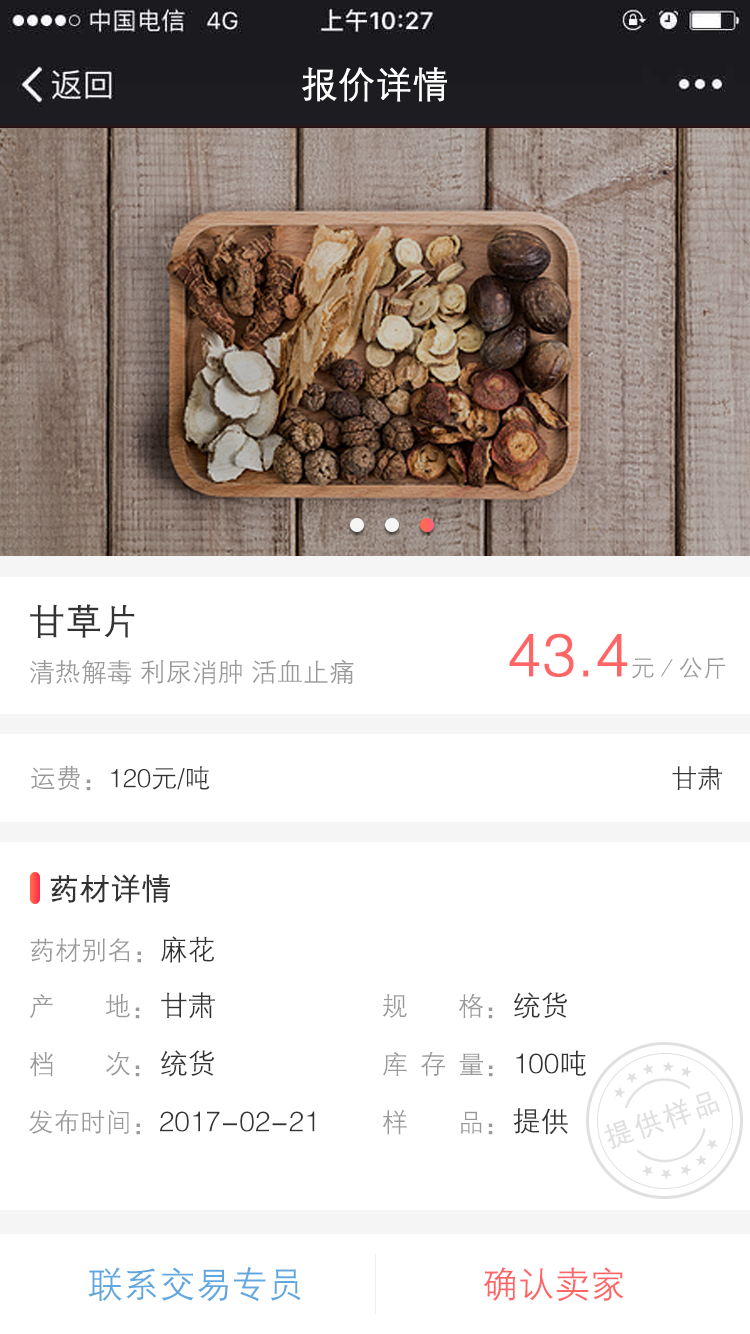
<style>
.page{position:relative;width:750px;height:1334px;background:#ffffff}
.page>*{position:absolute;margin:0}
.t1{font:36px "FZZDXJW--GB1-0";color:#ffffff;font-weight:bold}
.t2{font:36px "FZZDXJW--GB1-0";color:#333333;font-weight:bold}
.t3{font:60px "FZZDXJW--GB1-0";color:#ff6565;font-weight:bold}
.t4{font:24px "FZZDXJW--GB1-0";color:#999999}
.t5{font:26px "FZZDXJW--GB1-0";color:#999999}
.t6{font:26px "FZZDXJW--GB1-0";color:#333333}
.t7{font:30px "FZZDXJW--GB1-0";color:#333333;font-weight:bold}
.t8{font:28px "FZZDXJW--GB1-0";color:#333333}
.t9{font:27.7px "FZZDXJW--GB1-0";letter-spacing:0.08em;color:#e0e0e0;font-weight:bold}
.t10{font:36px "FZZDXJW--GB1-0";color:#5fa7de}
.t11{font:36px "FZZDXJW--GB1-0";color:#ff6565}
</style>
<div class="page">
<p class="t1" style="left:302px;top:67px;width:145px;height:35px">报价详情</p>
<p class="t2" style="left:30px;top:604px;width:105px;height:34px">甘草片</p>
<p class="t3" style="left:509px;top:633px;width:216px;height:46px">43.4<span class="t4">元／公斤</span></p>
<p class="t5" style="left:30px;top:659px;width:324px;height:26px">清热解毒 利尿消肿 活血止痛</p>
<p class="t6" style="left:31px;top:765px;width:179px;height:26px"><span class="t5">运费：</span>120元/吨</p>
<p class="t6" style="left:672px;top:765px;width:50px;height:25px">甘肃</p>
<p class="t7" style="left:50px;top:874px;width:120px;height:29px">药材详情</p>
<p class="t5" style="left:30px;top:938px;width:111px;height:25px">药材别名：</p>
<p class="t8" style="left:160px;top:936px;width:55px;height:27px">麻花</p>
<p class="t5" style="left:29px;top:993px;width:111px;height:26px">产       地：</p>
<p class="t8" style="left:161px;top:992px;width:54px;height:27px">甘肃</p>
<p class="t5" style="left:382px;top:993px;width:111px;height:26px">规       格：</p>
<p class="t8" style="left:514px;top:992px;width:54px;height:27px">统货</p>
<p class="t5" style="left:29px;top:1051px;width:111px;height:26px">档       次：</p>
<p class="t8" style="left:161px;top:1050px;width:54px;height:27px">统货</p>
<p class="t5" style="left:382px;top:1051px;width:111px;height:26px">库  存  量：</p>
<p class="t8" style="left:516px;top:1050px;width:70px;height:26px">100吨</p>
<p class="t9" style="left:604px;top:1091px;width:117px;height:59px;rotate:-19deg">提供样品</p>
<p class="t5" style="left:29px;top:1110px;width:111px;height:25px">发布时间：</p>
<p class="t5" style="left:382px;top:1109px;width:111px;height:26px">样       品：</p>
<p class="t8" style="left:513px;top:1108px;width:55px;height:27px">提供</p>
<p class="t8" style="left:160px;top:1111px;width:155px;height:21px">2017-02-21</p>
<p class="t10" style="left:88px;top:1267px;width:213px;height:35px">联系交易专员</p>
<p class="t11" style="left:483px;top:1267px;width:141px;height:35px">确认卖家</p>
</div>
